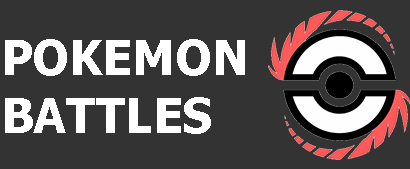
<style>
.page{position:relative;width:410px;height:169px;background:#333333}
.page>*{position:absolute;margin:0}
.t1{font:48px "Tahoma-Bold";color:#ffffff}
</style>
<div class="page">
<p class="t1" style="left:5px;top:39px;width:240px;height:95px">POKEMON<br>BATTLES</p>
</div>
